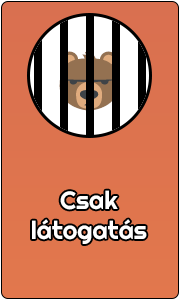
<style>
.page{position:relative;width:180px;height:300px}
.page>*{position:absolute;margin:0}
.t1{font:25px "Righteous-Regular";color:#ffffff}
</style>
<div class="page">
<p class="t1" style="left:32px;top:190px;width:115px;height:54px;text-align:center">Csak<br>látogatás</p>
</div>
